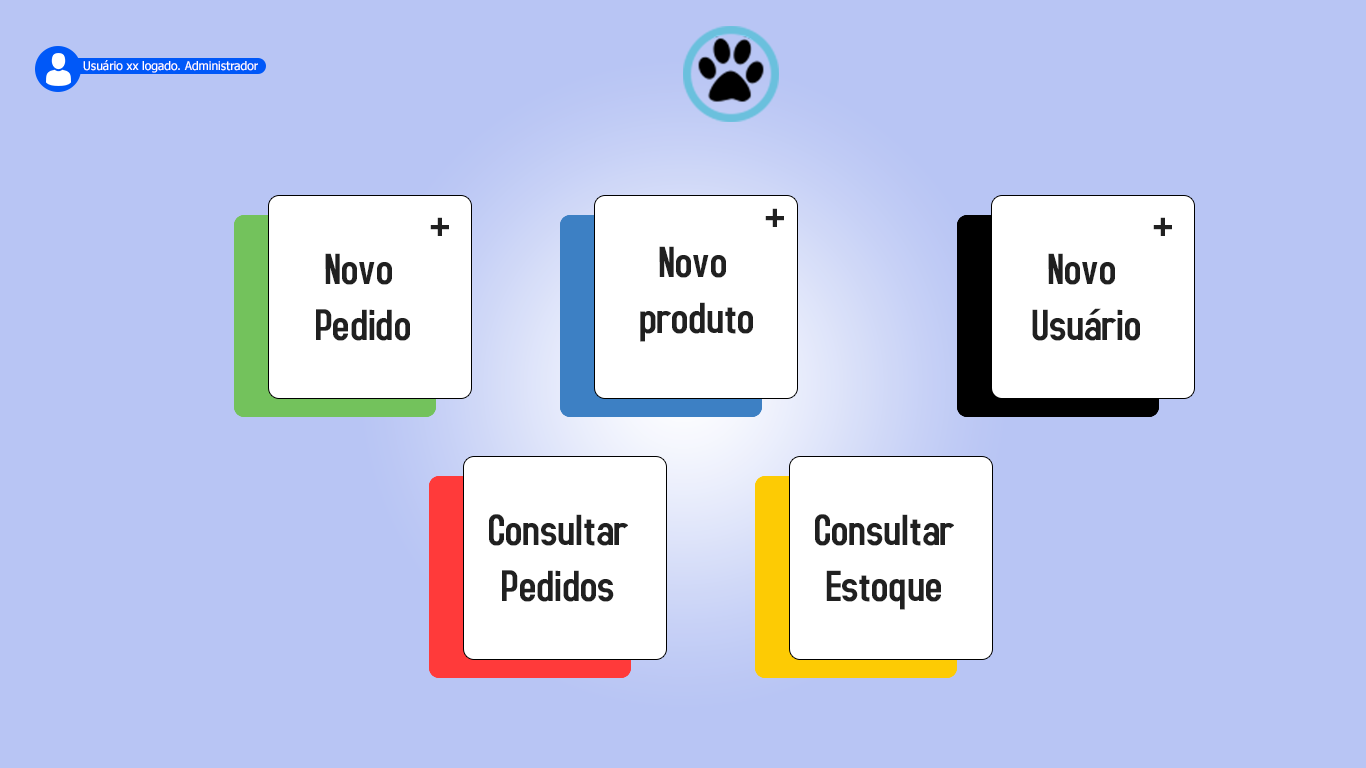
<style>
.page{position:relative;width:1366px;height:768px;background:#b8c5f4}
.page>*{position:absolute;margin:0}
.t1{font:12px "Tahoma";color:#ffffff}
.t2{font:46.3px "AccidentalPresidency";color:#202020}
</style>
<div class="page">
<p class="t1" style="left:83px;top:60px;width:175px;height:13px">Usuário xx logado. Administrador</p>
<p class="t2" style="left:765px;top:208px;width:19px;height:19px">+</p>
<p class="t2" style="left:430px;top:217px;width:19px;height:19px">+</p>
<p class="t2" style="left:1153px;top:217px;width:19px;height:19px">+</p>
<p class="t2" style="left:640px;top:246px;width:113px;height:96px;text-align:center">Novo <br>produto</p>
<p class="t2" style="left:316px;top:253px;width:94px;height:88px;text-align:center">Novo <br>Pedido</p>
<p class="t2" style="left:1032px;top:253px;width:108px;height:88px;text-align:center">Novo <br>Usuário</p>
<p class="t2" style="left:489px;top:514px;width:139px;height:88px;text-align:center">Consultar<br>Pedidos</p>
<p class="t2" style="left:815px;top:514px;width:139px;height:96px;text-align:center">Consultar<br>Estoque</p>
</div>
